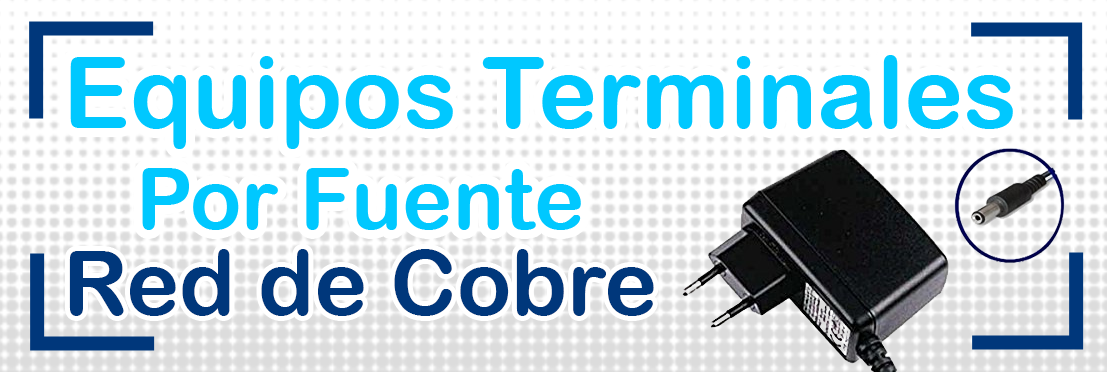
<style>
.page{position:relative;width:1107px;height:372px;background:#ffffff}
.page>*{position:absolute;margin:0}
.t1{font:100px "ArialRoundedMTBold";color:#00c8ff}
.t2{font:85px "ArialRoundedMTBold";color:#00c8ff}
.t3{font:90px "ArialRoundedMTBold";color:#00377b}
</style>
<div class="page">
<p class="t1" style="left:70px;top:55px;width:943px;height:94px">Equipos Terminales</p>
<p class="t2" style="left:142px;top:168px;width:439px;height:62px">Por Fuente</p>
<p class="t3" style="left:69px;top:249px;width:585px;height:67px">Red de Cobre</p>
</div>
